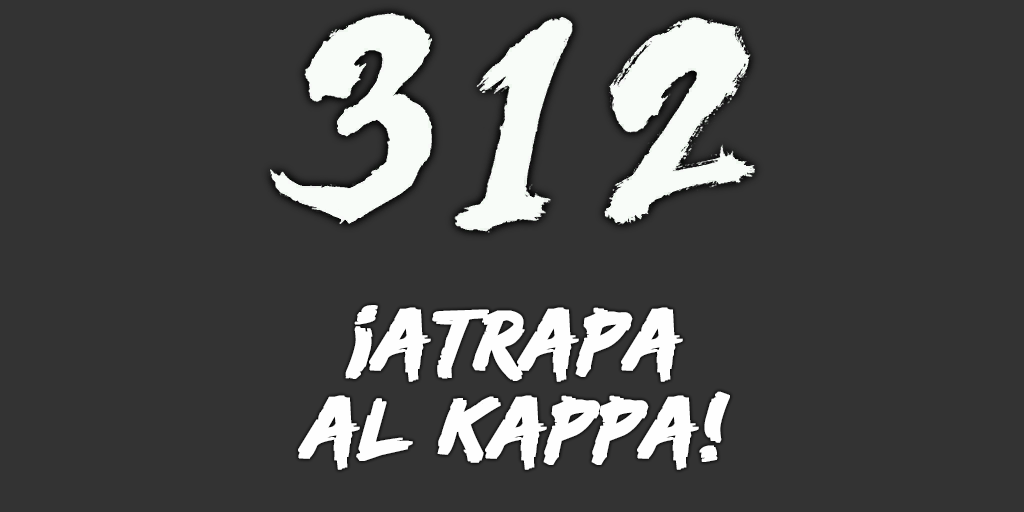
<style>
.page{position:relative;width:1024px;height:512px;background:#333333}
.page>*{position:absolute;margin:0}
.t1{font:88px/88px "EdoSZ";color:#fefefe;font-weight:bold;font-style:italic;scale:1.04 1}
</style>
<div class="page">
<p class="t1" style="left:298px;top:305px;width:432px;height:165px;text-align:center">¡atrapa<br>al kappa!</p>
</div>
